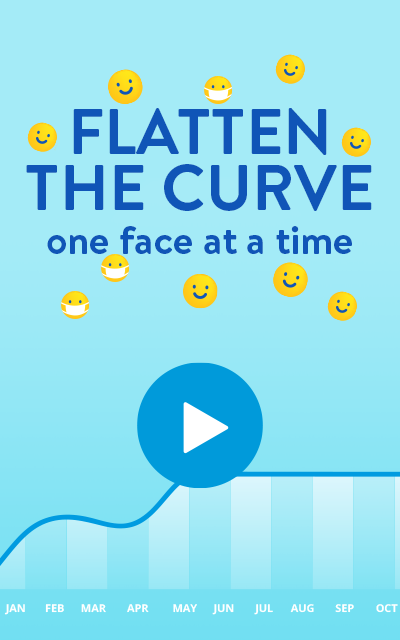
<style>
.page{position:relative;width:400px;height:640px;background:#a4ebf7}
.page>*{position:absolute;margin:0}
.t1{font:39.8px/43.8px "Bogle-Bold";color:#1055b7}
.t2{font:64.3px/56px "Bogle-Bold";color:#1055b7}
</style>
<div class="page">
<p class="t1" style="left:26px;top:108px;width:346px;height:146px;text-align:center"><span class="t2">FLATTEN<br>THE CURVE<br></span>one face at a time</p>
</div>
